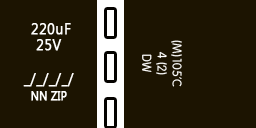
<style>
.page{position:relative;width:256px;height:128px;background:#1c1401}
.page>*{position:absolute;margin:0}
.t1{font:15.7px/16.7px "SegoeUI";letter-spacing:0.02em;color:#ffffff;font-weight:bold;scale:0.89 1}
.t2{font:11.8px/16.7px "SegoeUI";letter-spacing:0.02em;color:#ffffff;font-weight:bold;scale:0.89 1}
.t3{font:12.5px "Vagabond";color:#ffffff}
</style>
<div class="page">
<p class="t1" style="left:23px;top:23px;width:51px;height:78px;text-align:center">220uF<br>25V<br><br>_/_/_/_/<br><span class="t2">NN ZIP</span></p>
<p class="t3" style="left:142px;top:40px;width:40px;height:47px;text-align:center;rotate:90deg">(M)105’C<br>4 (2)<br>DW</p>
</div>
